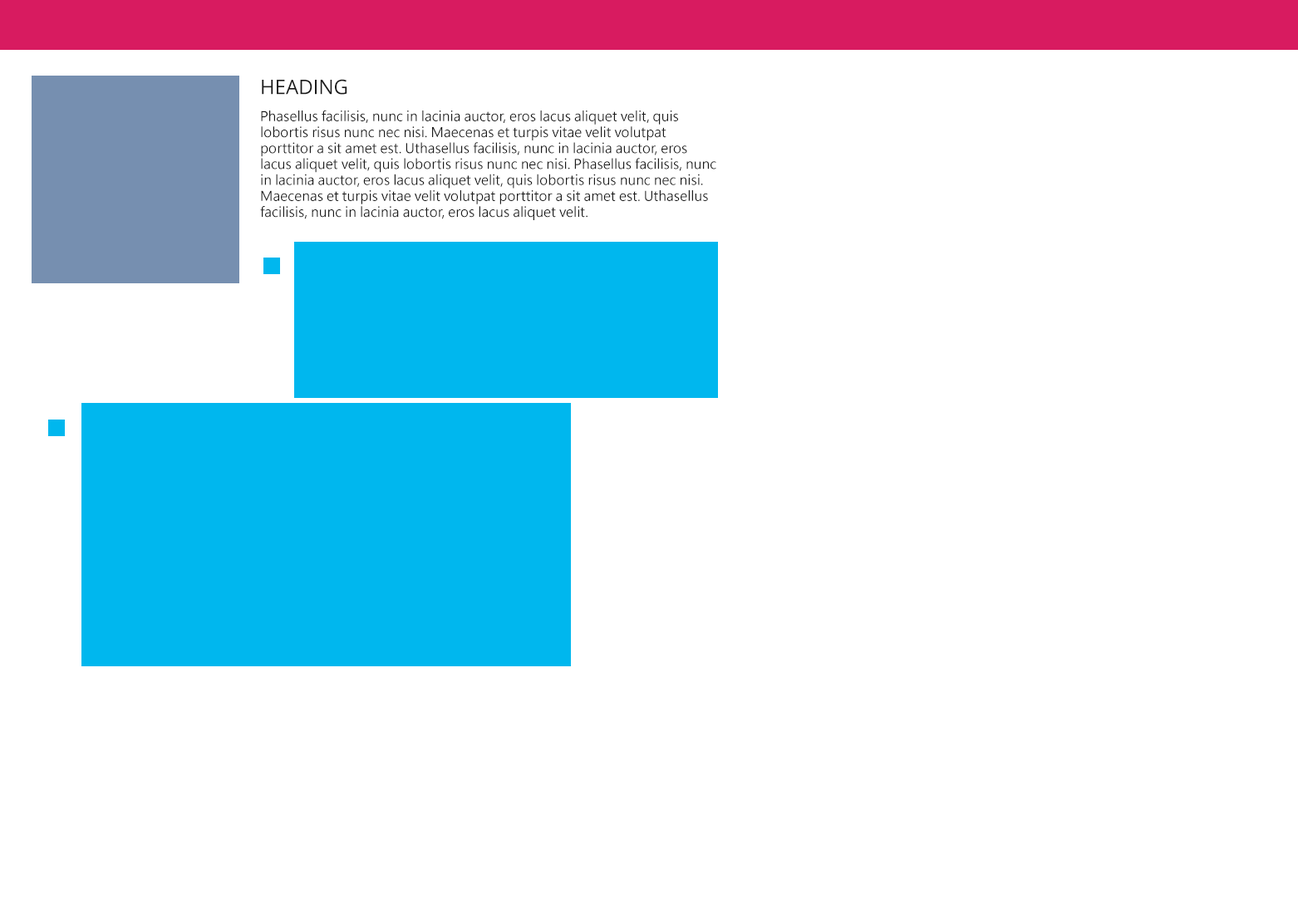
<style>
.page{position:relative;width:1298px;height:918px;background:#ffffff}
.page>*{position:absolute;margin:0}
.t1{font:19.9px "OpenSans";color:#1a1a1a;text-transform:uppercase}
.t2{font:13.3px "MicrosoftJhengHeiUIRegular";color:#1a1a1a}
</style>
<div class="page">
<p class="t1" style="left:262px;top:79px;width:85px;height:16px">Heading</p>
<p class="t2" style="left:260px;top:110px;width:456px;height:110px">Phasellus facilisis, nunc in lacinia auctor, eros lacus aliquet velit, quis lobortis risus nunc nec nisi. Maecenas et turpis vitae velit volutpat porttitor a sit amet est. Uthasellus facilisis, nunc in lacinia auctor, eros lacus aliquet velit, quis lobortis risus nunc nec nisi. Phasellus facilisis, nunc in lacinia auctor, eros lacus aliquet velit, quis lobortis risus nunc nec nisi. Maecenas et turpis vitae velit volutpat porttitor a sit amet est. Uthasellus facilisis, nunc in lacinia auctor, eros lacus aliquet velit.</p>
</div>
